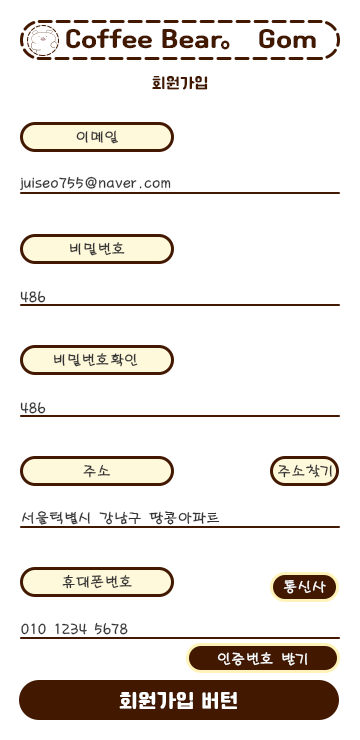
<style>
.page{position:relative;width:360px;height:740px;background:#ffffff}
.page>*{position:absolute;margin:0}
.t1{font:25px "Cafe24Ssurround";color:#421900}
.t2{font:25px "NotoSansKR-Black";color:#421900}
.t3{font:15px "Cafe24Ssurround";color:#421900}
.t4{font:15px "MDGaesung";color:#333333}
.t5{font:15px "MDGaesung";color:#ffffff}
.t6{font:20px "Cafe24Ssurround";color:#ffffff}
</style>
<div class="page">
<p class="t1" style="left:66px;top:28px;width:250px;height:21px">Coffee Bear 。Gom</p>
<p class="t2" style="left:221px;top:40px;width:9px;height:10px">。</p>
<p class="t3" style="left:152px;top:76px;width:56px;height:14px">회원가입</p>
<p class="t4" style="left:76px;top:130px;width:42px;height:14px">이메일</p>
<p class="t4" style="left:20px;top:176px;width:151px;height:15px">juiseo755@naver.com</p>
<p class="t4" style="left:70px;top:242px;width:55px;height:14px">비밀번호</p>
<p class="t4" style="left:20px;top:291px;width:26px;height:12px">486</p>
<p class="t4" style="left:54px;top:353px;width:84px;height:14px">비밀번호확인</p>
<p class="t4" style="left:20px;top:402px;width:26px;height:12px">486</p>
<p class="t4" style="left:83px;top:464px;width:28px;height:14px">주소</p>
<p class="t4" style="left:278px;top:464px;width:54px;height:14px">주소찾기</p>
<p class="t4" style="left:22px;top:511px;width:198px;height:14px">서울턱별시 강남구 땅콩아파트</p>
<p class="t4" style="left:62px;top:575px;width:70px;height:14px">휴대폰번호</p>
<p class="t5" style="left:283px;top:580px;width:43px;height:14px">통신사</p>
<p class="t4" style="left:21px;top:622px;width:107px;height:13px">010 1234 5678</p>
<p class="t5" style="left:217px;top:652px;width:90px;height:14px">인증번호 받기</p>
<p class="t6" style="left:119px;top:692px;width:118px;height:17px">회원가입 버턴</p>
</div>
